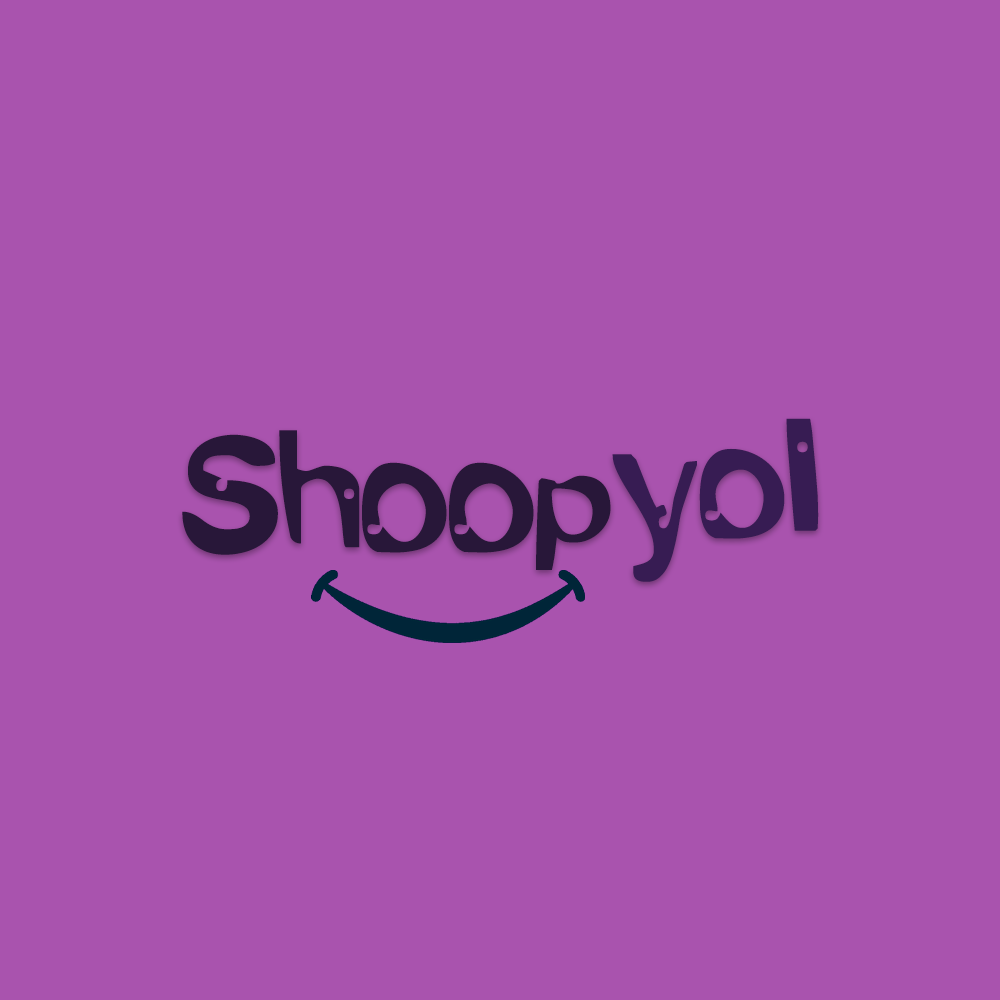
<style>
.page{position:relative;width:1000px;height:1000px;background:#a953ae}
.page>*{position:absolute;margin:0}
.t1{font:150px "AlienMarksman";color:#371c53}
.t2{font:150px "AlienMarksman";color:#241536}
</style>
<div class="page">
<p class="t1" style="left:612px;top:418px;width:207px;height:164px">yol</p>
<p class="t2" style="left:182px;top:430px;width:429px;height:140px">Shoop</p>
</div>
